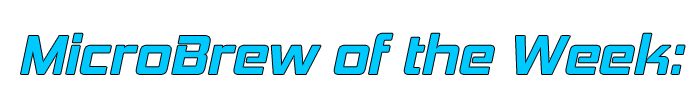
<style>
.page{position:relative;width:700px;height:100px;background:#ffffff}
.page>*{position:absolute;margin:0}
.t1{font:56px "HemiHeadRg-BoldItalic";color:#00c9ff}
</style>
<div class="page">
<p class="t1" style="left:21px;top:33px;width:664px;height:41px">MicroBrew of the Week:</p>
</div>
